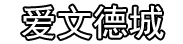
<style>
.page{position:relative;width:183px;height:44px;background:#ffffff}
.page>*{position:absolute;margin:0}
.t1{font:36px "SimHei";color:#ffffff}
</style>
<div class="page">
<p class="t1" style="left:22px;top:5px;width:142px;height:34px">爱文德城</p>
</div>
